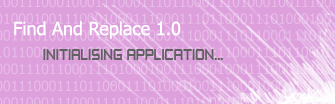
<style>
.page{position:relative;width:335px;height:104px;background:#dda0dd}
.page>*{position:absolute;margin:0}
.t1{font:18px "Tahoma";color:#ffffff}
.t2{font:14px "ZeroThrees";color:#616161}
</style>
<div class="page">
<p class="t1" style="left:14px;top:21px;width:167px;height:18px">Find And Replace 1.0</p>
<p class="t2" style="left:43px;top:49px;width:180px;height:11px">INITIALISING APPLICATION...</p>
</div>
